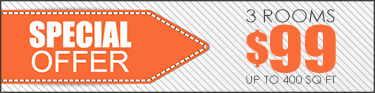
<style>
.page{position:relative;width:375px;height:93px;background:#fa6c37}
.page>*{position:absolute;margin:0}
.t1{font:17.8px "CenturyGothic";color:#474644;scale:1.1 1}
.t2{font:40.2px "Impact";color:#fa6c37;scale:1.1 1}
.t3{font:58.9px "Impact";color:#fa6c37;scale:1.1 1}
.t4{font:0px "Impact";color:#25231f;scale:1.1 1}
.t5{font:10.9px "CenturyGothic";scale:1.1 1}
</style>
<div class="page">
<p class="t1" style="left:246px;top:9px;width:89px;height:14px">3 ROOMS</p>
<p class="t2" style="left:246px;top:29px;width:23px;height:39px">$</p>
<p class="t3" style="left:270px;top:24px;width:66px;height:49px"><span class="t4">$</span>99</p>
<p class="t5" style="left:246px;top:75px;width:90px;height:10px">UP TO 400 SQ FT</p>
</div>
